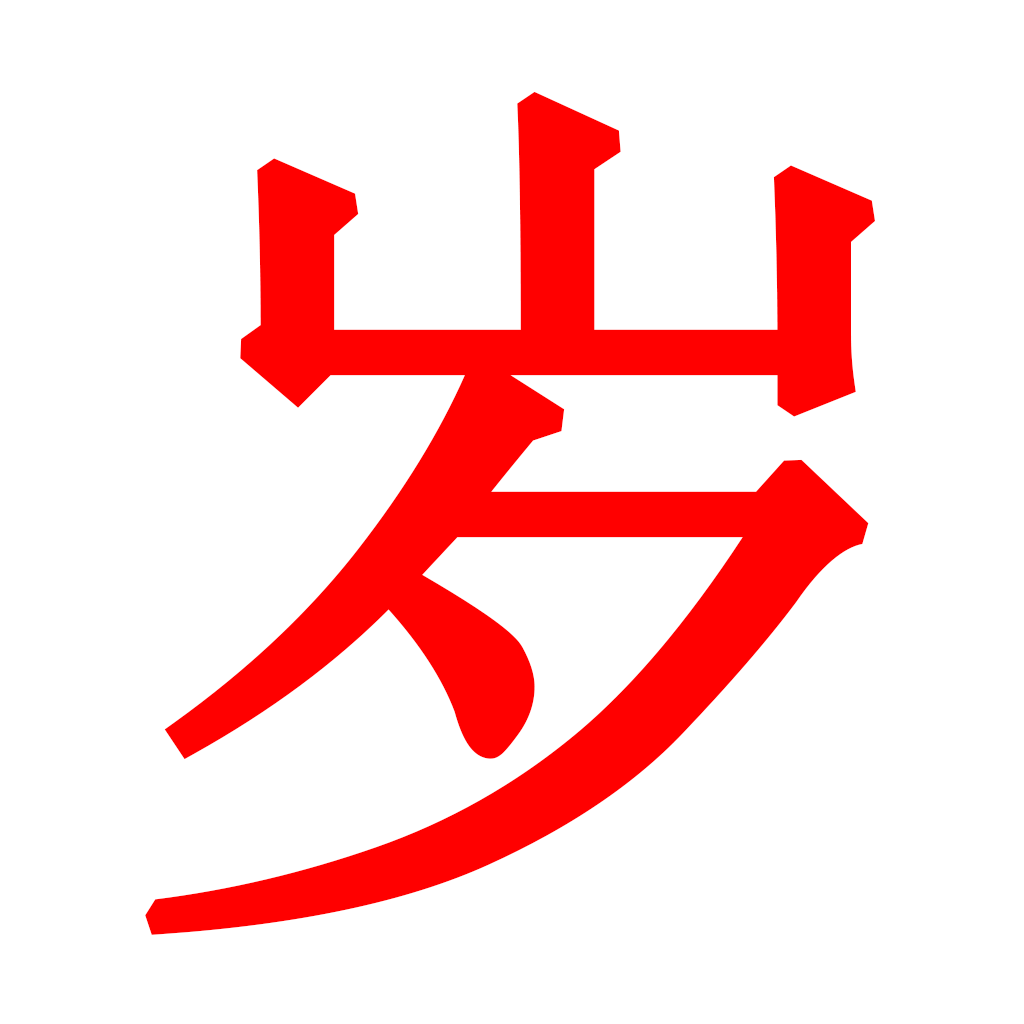
<style>
.page{position:relative;width:1024px;height:1024px;background:#ffffff}
.page>*{position:absolute;margin:0}
.t1{font:900px "SimSun";color:#ff0000;font-weight:bold}
</style>
<div class="page">
<p class="t1" style="left:145px;top:91px;width:730px;height:844px">岁</p>
</div>
